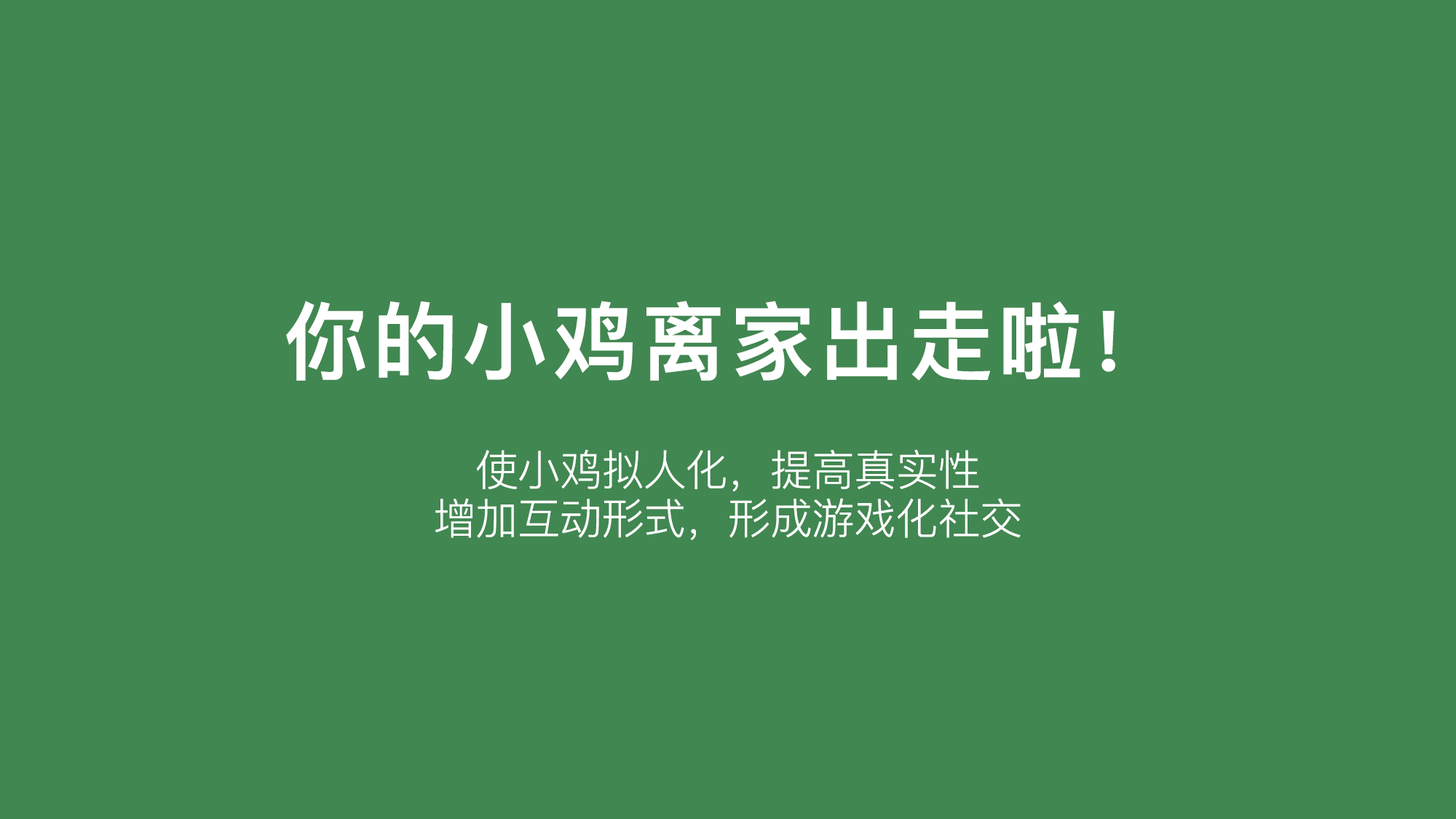
<style>
.page{position:relative;width:1456px;height:819px;background:#418751}
.page>*{position:absolute;margin:0}
.t1{font:85px "PingFangHeiTC-W8-Proportional";letter-spacing:0.05em;color:#ffffff}
.t2{font:42.5px/48.6px "PingFangSC-Regular";letter-spacing:-0.01em;color:#ffffff}
</style>
<div class="page">
<p class="t1" style="left:286px;top:301px;width:829px;height:80px">你的小鸡离家出走啦！</p>
<p class="t2" style="left:435px;top:449px;width:586px;height:91px;text-align:center">使小鸡拟人化，提高真实性<br>增加互动形式，形成游戏化社交</p>
</div>
